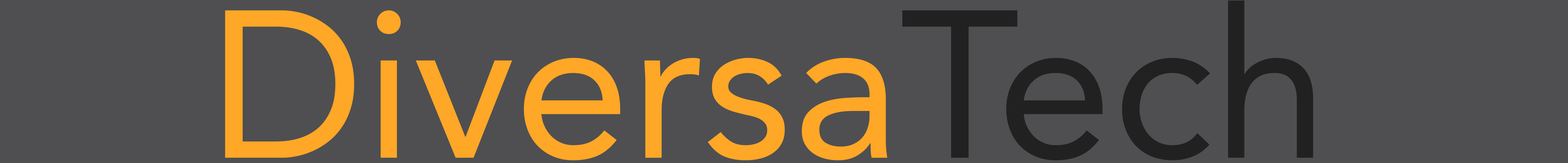
<style>
.page{position:relative;width:1568px;height:163px;background:#4f4f51}
.page>*{position:absolute;margin:0}
.t1{font:208.2px "Avenir-Roman";color:#ffa726}
.t2{font:208.2px "Avenir-Roman";color:#212121}
</style>
<div class="page">
<p class="t1" style="left:225px;top:0px;width:1088px;height:161px">Diversa<span class="t2">Tech</span></p>
</div>
